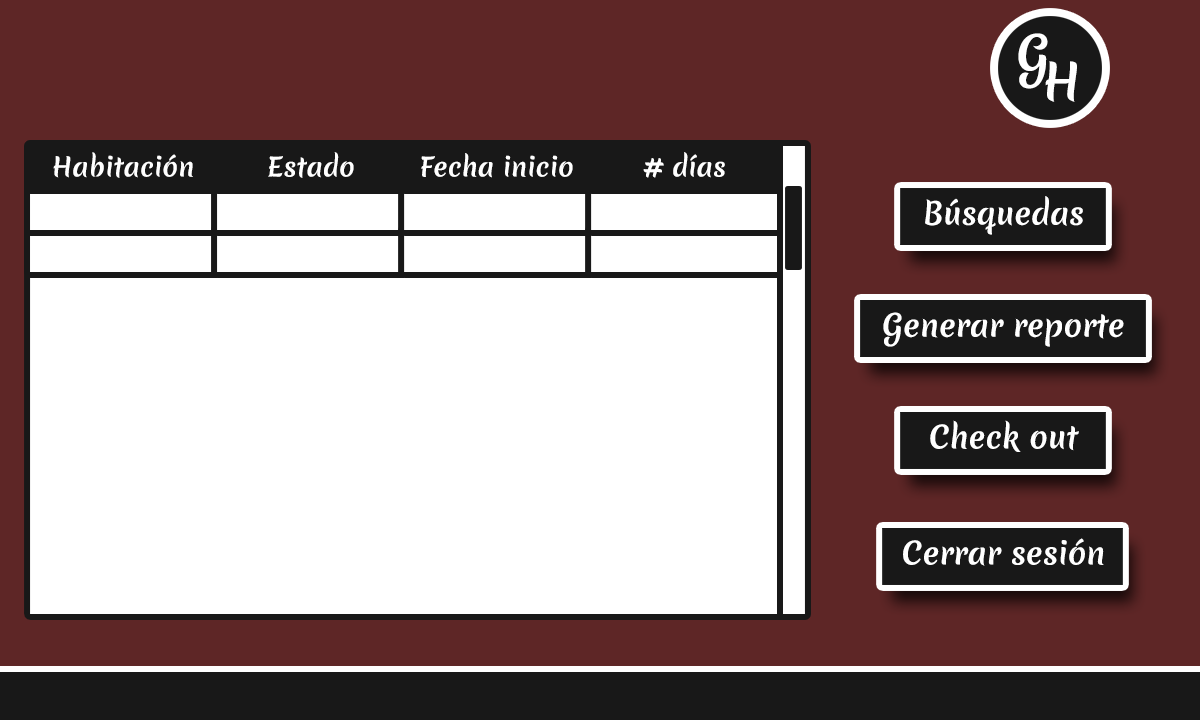
<style>
.page{position:relative;width:1200px;height:720px;background:#ffffff}
.page>*{position:absolute;margin:0}
.t1{font:48.4px "MeriendaOne-Regular";color:#ffffff}
.t2{font:25.4px "MeriendaOne-Regular";color:#ffffff}
.t3{font:30px "MeriendaOne-Regular";color:#ffffff}
</style>
<div class="page">
<p class="t1" style="left:1018px;top:33px;width:30px;height:56px">G</p>
<p class="t1" style="left:1045px;top:61px;width:32px;height:41px">H</p>
<p class="t2" style="left:53px;top:152px;width:140px;height:26px">Habitación</p>
<p class="t2" style="left:268px;top:152px;width:86px;height:26px">Estado</p>
<p class="t2" style="left:421px;top:153px;width:152px;height:25px">Fecha inicio</p>
<p class="t2" style="left:643px;top:152px;width:82px;height:26px"># días</p>
<p class="t3" style="left:925px;top:196px;width:158px;height:39px">Búsquedas</p>
<p class="t3" style="left:883px;top:312px;width:241px;height:35px">Generar reporte</p>
<p class="t3" style="left:930px;top:420px;width:149px;height:32px">Check out</p>
<p class="t3" style="left:903px;top:538px;width:201px;height:28px">Cerrar sesión</p>
</div>
